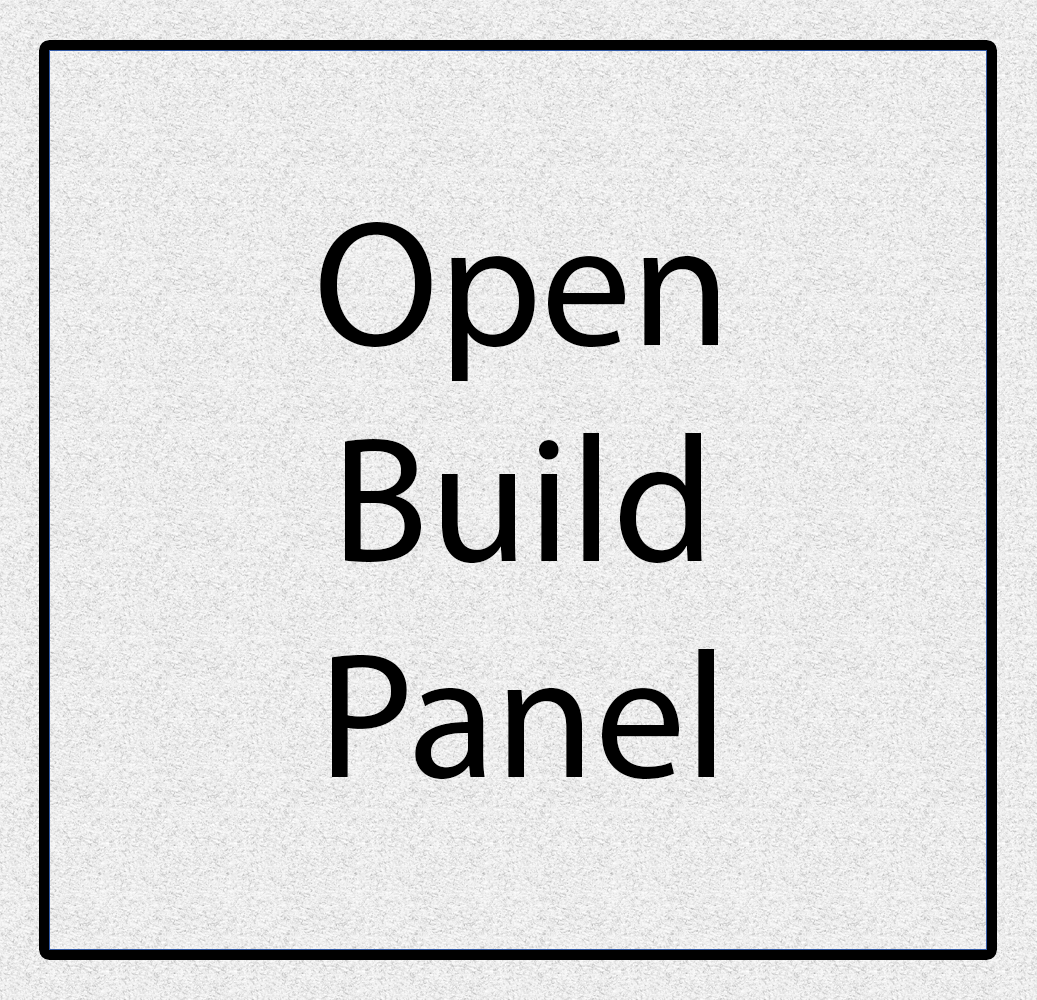
<style>
.page{position:relative;width:1037px;height:1000px}
.page>*{position:absolute;margin:0}
.t1{font:180px "MyriadPro-Regular";color:#000000}
</style>
<div class="page">
<p class="t1" style="left:320px;top:222px;width:398px;height:557px;text-align:center">Open<br>Build<br>Panel</p>
</div>
